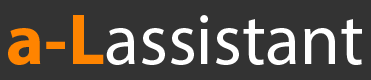
<style>
.page{position:relative;width:371px;height:80px;background:#333333}
.page>*{position:absolute;margin:0}
.t1{font:72px "MyriadPro-Regular";color:#ffffff}
.t2{font:72px "MyriadPro-Bold";color:#ff8400}
</style>
<div class="page">
<p class="t1" style="left:8px;top:15px;width:354px;height:50px"><span class="t2">a-L</span>assistant</p>
</div>
